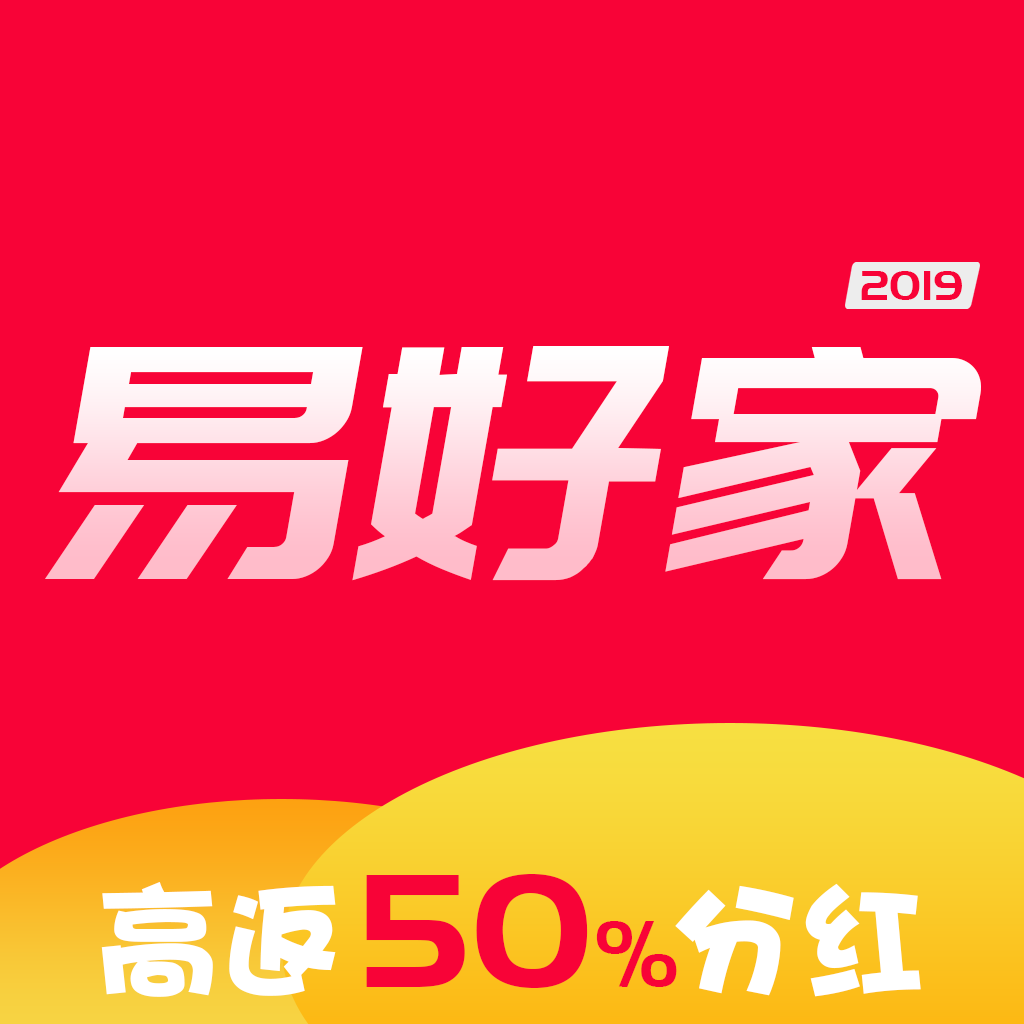
<style>
.page{position:relative;width:1024px;height:1024px;background:#f80337}
.page>*{position:absolute;margin:0}
.t1{font:44.1px "PangMenZhengDao";color:#f80337}
.t2{font:322.7px "PangMenZhengDao";font-style:italic}
.t3{font:168px "PangMenZhengDao";color:#f80337}
.t4{font:98.7px "PangMenZhengDao";color:#f80337}
.t5{font:126.7px "DFHaiBaoW12";color:#ffffff}
</style>
<div class="page">
<p class="t1" style="left:861px;top:271px;width:101px;height:29px">2019</p>
<p class="t2" style="left:45px;top:346px;width:936px;height:235px">易好家</p>
<p class="t3" style="left:366px;top:874px;width:311px;height:114px">50<span class="t4">%</span></p>
<p class="t5" style="left:101px;top:882px;width:820px;height:115px">高返     分红</p>
</div>
